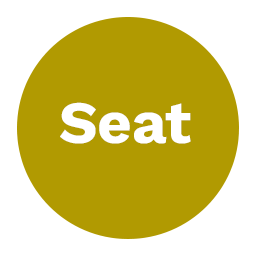
<style>
.page{position:relative;width:256px;height:256px;background:#b19a01}
.page>*{position:absolute;margin:0}
.t1{font:60px "WorkSansRoman-Bold";color:#ffffff}
</style>
<div class="page">
<p class="t1" style="left:60px;top:102px;width:131px;height:42px">Seat</p>
</div>
